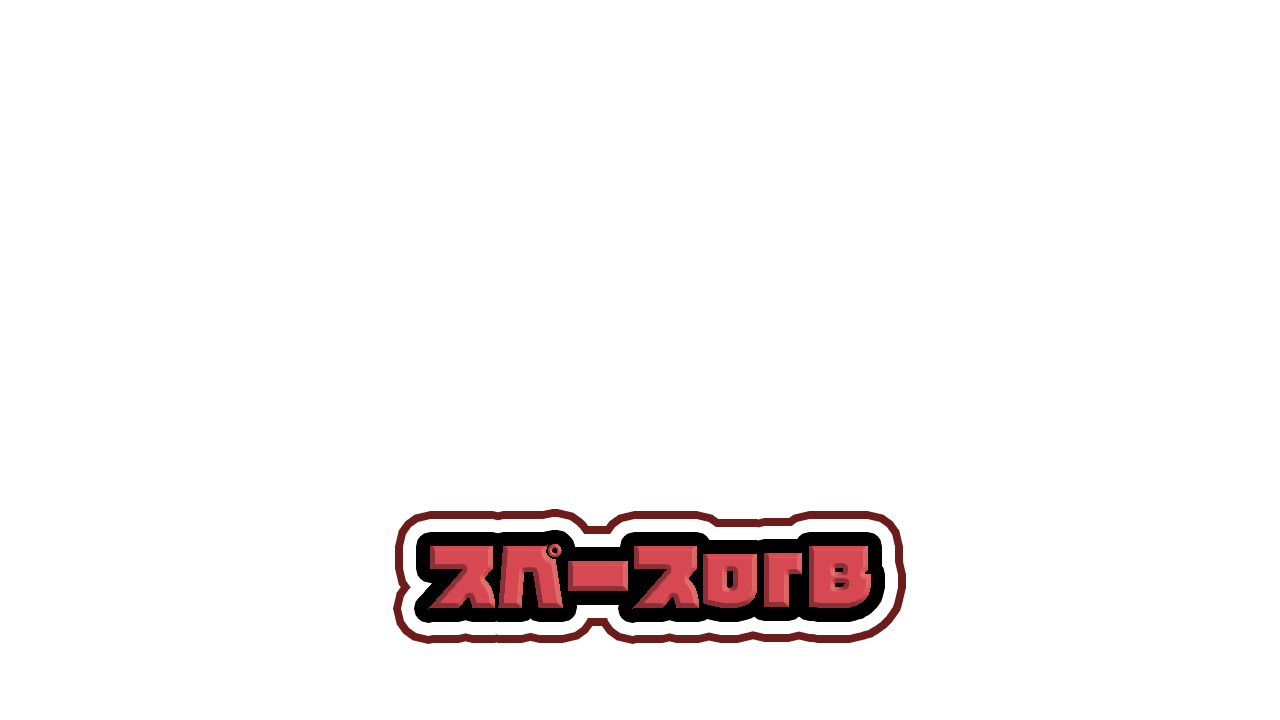
<style>
.page{position:relative;width:1280px;height:720px;background:#ffffff}
.page>*{position:absolute;margin:0}
.t1{font:68.1px "FZGonta-kana";color:#d64953}
</style>
<div class="page">
<p class="t1" style="left:428px;top:544px;width:443px;height:65px">スペースorB</p>
</div>
